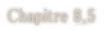
<style>
.page{position:relative;width:104px;height:31px;background:#ffffff}
.page>*{position:absolute;margin:0}
.t1{font:19px "MS-PMincho";color:#d6cdc1;font-weight:bold;scale:0.84 1}
</style>
<div class="page">
<p class="t1" style="left:8px;top:8px;width:87px;height:17px">Chapitre 8.5</p>
</div>
